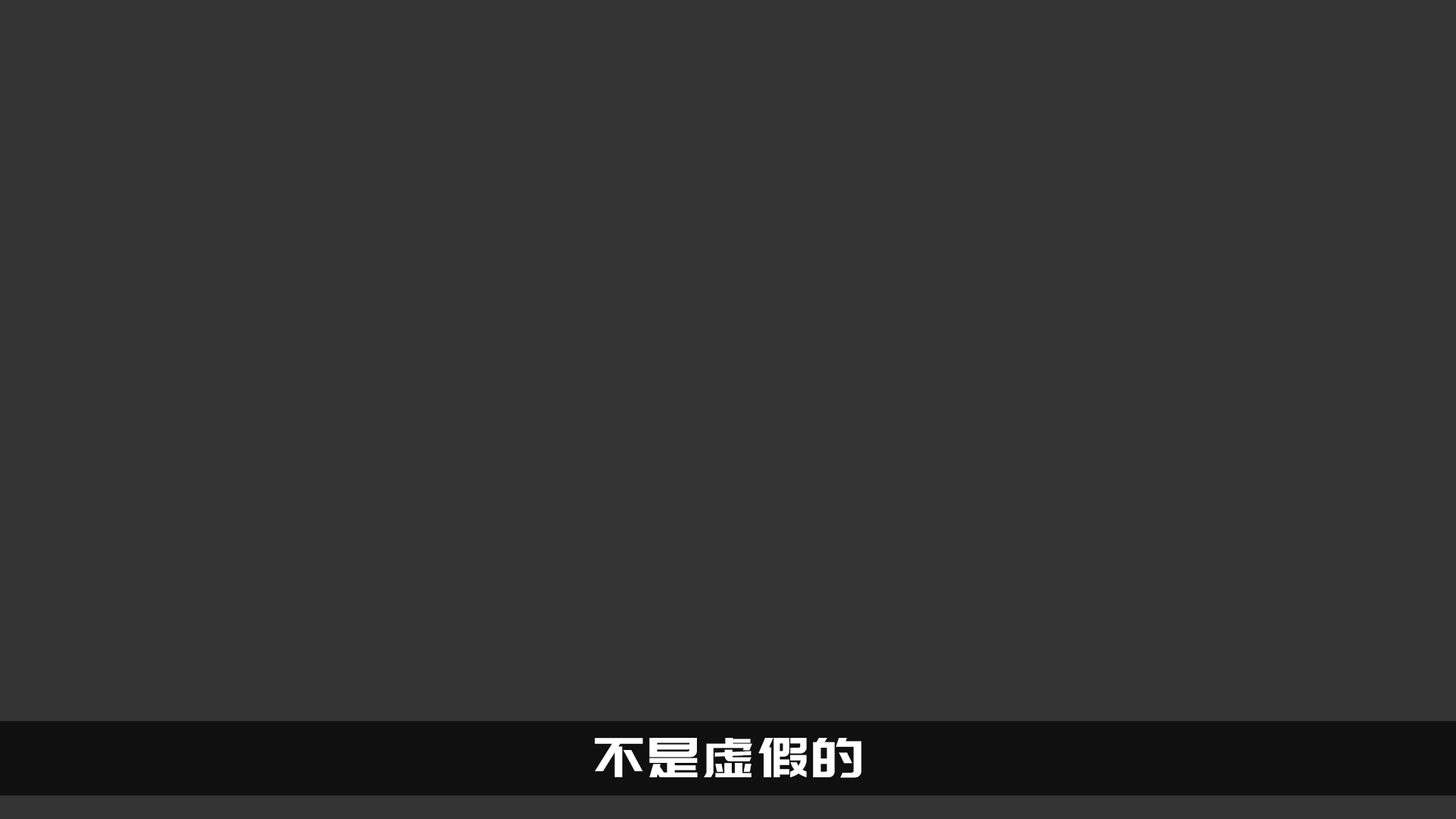
<style>
.page{position:relative;width:1456px;height:819px;background:#333333}
.page>*{position:absolute;margin:0}
.t1{font:54.6px "PangMenZhengDao-3";color:#ffffff}
</style>
<div class="page">
<p class="t1" style="left:595px;top:738px;width:266px;height:40px">不是虚假的</p>
</div>
